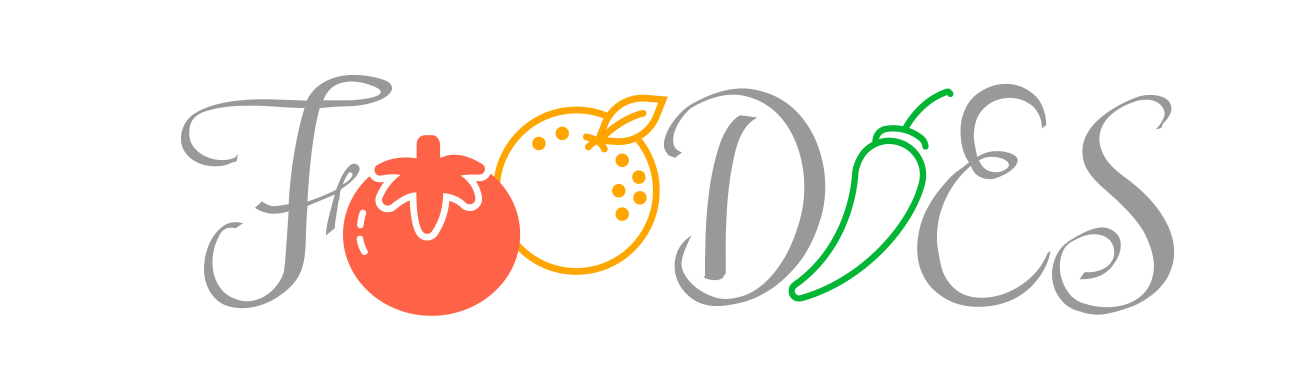
<style>
.page{position:relative;width:1290px;height:390px;background:#ffffff}
.page>*{position:absolute;margin:0}
.t1{font:300px "Kiraly-Demo";color:#999999}
</style>
<div class="page">
<p class="t1" style="left:181px;top:74px;width:994px;height:241px">F   D ES</p>
</div>
